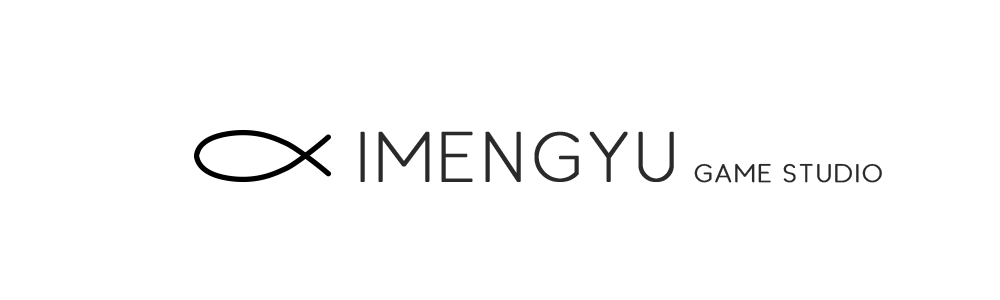
<style>
.page{position:relative;width:1000px;height:300px;background:#ffffff}
.page>*{position:absolute;margin:0}
.t1{font:66px "Halva";color:#2a2a2a;font-weight:bold}
.t2{font:24px "HalvaMedium-Regular";color:#2a2a2a;font-weight:bold}
</style>
<div class="page">
<p class="t1" style="left:360px;top:131px;width:314px;height:51px">IMENGYU</p>
<p class="t2" style="left:694px;top:163px;width:188px;height:20px">GAME STUDIO</p>
</div>
